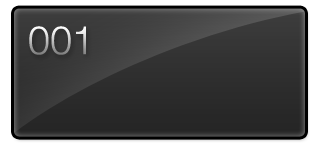
<style>
.page{position:relative;width:320px;height:145px}
.page>*{position:absolute;margin:0}
.t1{font:39.2px "HelveticaNeue-Light";letter-spacing:0.01em}
</style>
<div class="page">
<p class="t1" style="left:29px;top:26px;width:57px;height:29px">001</p>
</div>
